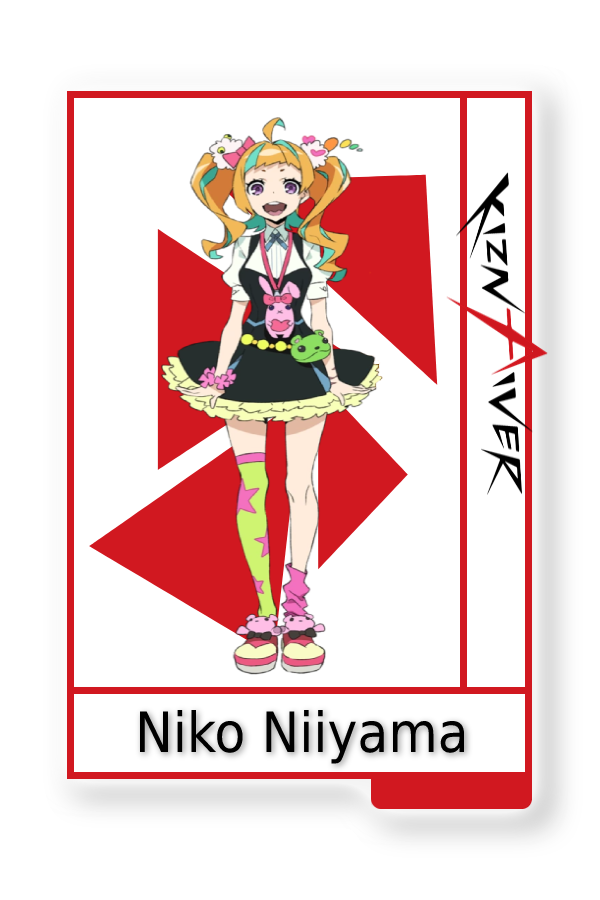
<style>
.page{position:relative;width:600px;height:900px;background:#ffffff}
.page>*{position:absolute;margin:0}
.t1{font:55.4px "CoolveticaRg-Regular";color:#000000;scale:0.91 1}
</style>
<div class="page">
<p class="t1" style="left:139px;top:709px;width:326px;height:55px">Niko Niiyama</p>
</div>
